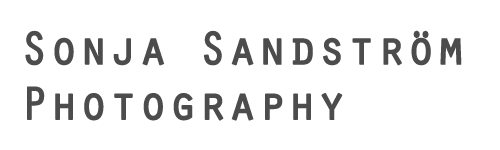
<style>
.page{position:relative;width:500px;height:150px;background:#ffffff}
.page>*{position:absolute;margin:0}
.t1{font:46px "Orator-Regular";color:#4c4c4c;font-weight:bold}
</style>
<div class="page">
<p class="t1" style="left:25px;top:30px;width:437px;height:91px">Sonja Sandström<br>Photography</p>
</div>
